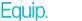
<style>
.page{position:relative;width:82px;height:21px;background:#ffffff}
.page>*{position:absolute;margin:0}
.t1{font:20px "GothicMB101Pro-Regular";letter-spacing:-0.06em;color:#1dbcc0;scale:0.9 1}
</style>
<div class="page">
<p class="t1" style="left:1px;top:2px;width:47px;height:19px">Equip.</p>
</div>
